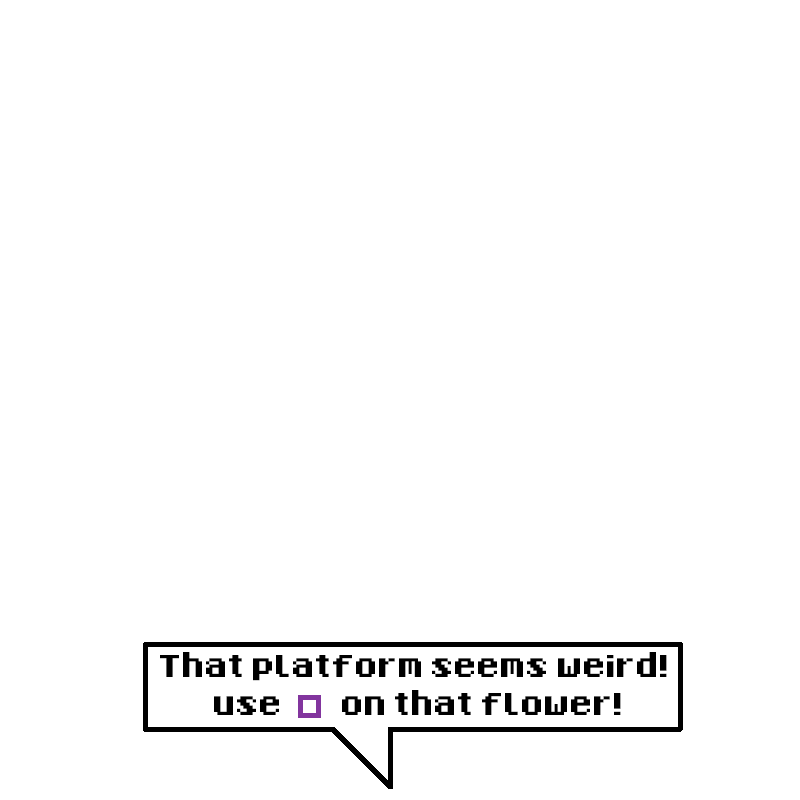
<style>
.page{position:relative;width:800px;height:800px;background:#ffffff}
.page>*{position:absolute;margin:0}
.t1{font:12px/37.5px "8-Bit-Madness";letter-spacing:-0.04em;color:#000000}
</style>
<div class="page">
<p class="t1" style="left:160px;top:652px;width:507px;height:63px;text-align:center">That platform seems weird! <br>use        on that flower!</p>
</div>
